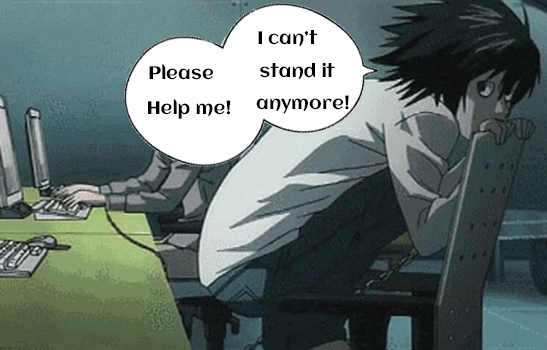
<style>
.page{position:relative;width:547px;height:350px}
.page>*{position:absolute;margin:0}
.t1{font:18px "Aclonica-Regular";color:#000000}
</style>
<div class="page">
<p class="t1" style="left:258px;top:30px;width:60px;height:17px">I can’t</p>
<p class="t1" style="left:149px;top:64px;width:64px;height:16px">Please</p>
<p class="t1" style="left:260px;top:62px;width:75px;height:18px">stand it</p>
<p class="t1" style="left:148px;top:99px;width:83px;height:20px">Help me!</p>
<p class="t1" style="left:256px;top:95px;width:93px;height:19px">anymore!</p>
</div>
